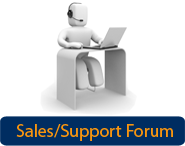
<style>
.page{position:relative;width:185px;height:146px;background:#ffffff}
.page>*{position:absolute;margin:0}
.t1{font:18.1px "MyriadPro-Regular";color:#f8950f}
</style>
<div class="page">
<p class="t1" style="left:16px;top:124px;width:157px;height:17px">Sales/Support Forum</p>
</div>
